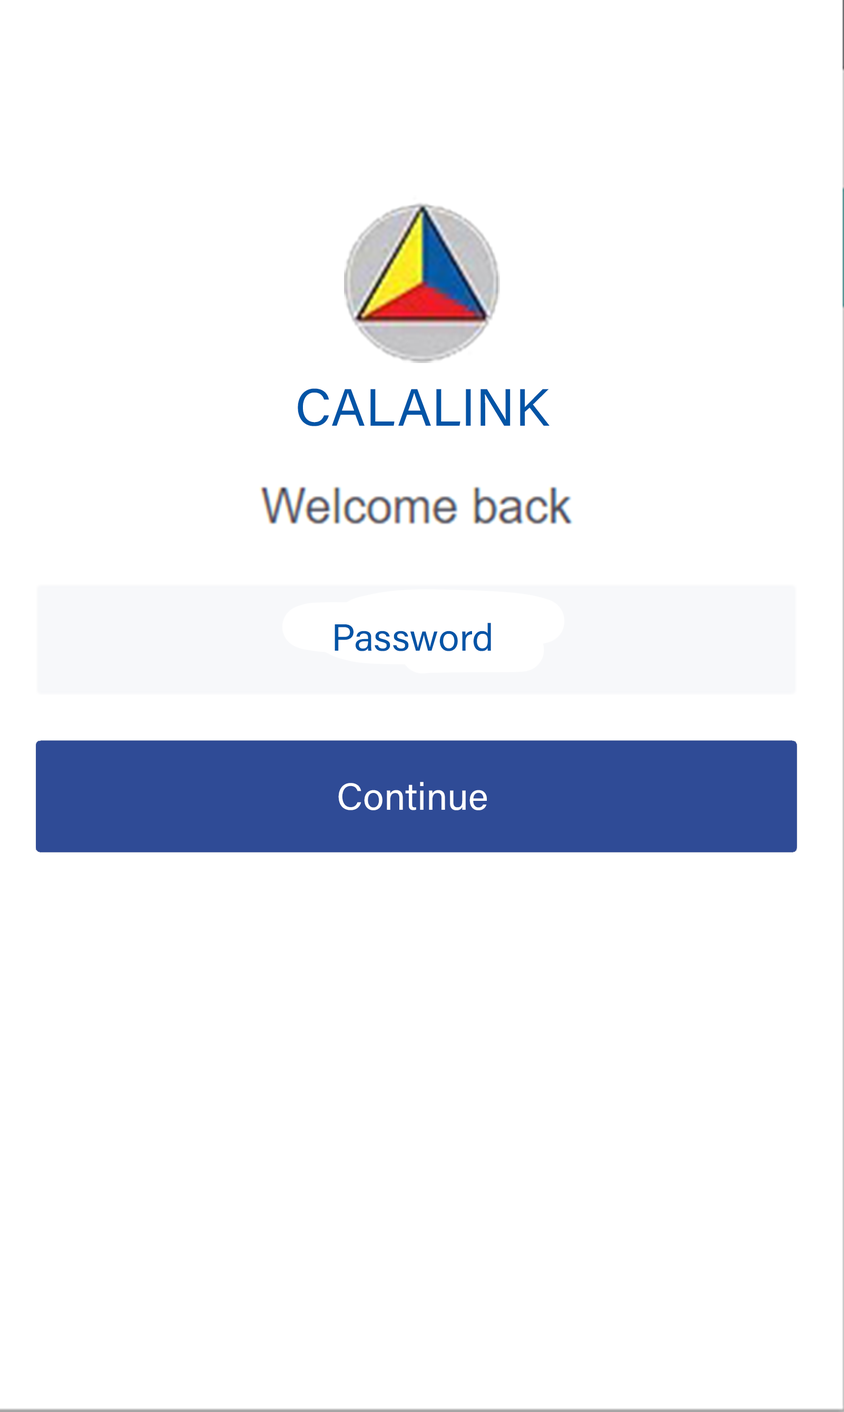
<style>
.page{position:relative;width:844px;height:1412px;background:#ffffff}
.page>*{position:absolute;margin:0}
.t1{font:52.7px "AcuminConcept-Regular";color:#0154a6;font-style:italic}
.t2{font:37.9px "AcuminConcept-Regular";color:#0154a6;font-style:italic}
.t3{font:37.9px "AcuminConcept-Regular";color:#ffffff;font-style:italic}
</style>
<div class="page">
<p class="t1" style="left:298px;top:388px;width:252px;height:38px">CALALINK</p>
<p class="t2" style="left:335px;top:623px;width:156px;height:28px">Password</p>
<p class="t3" style="left:338px;top:782px;width:149px;height:29px">Continue</p>
</div>
